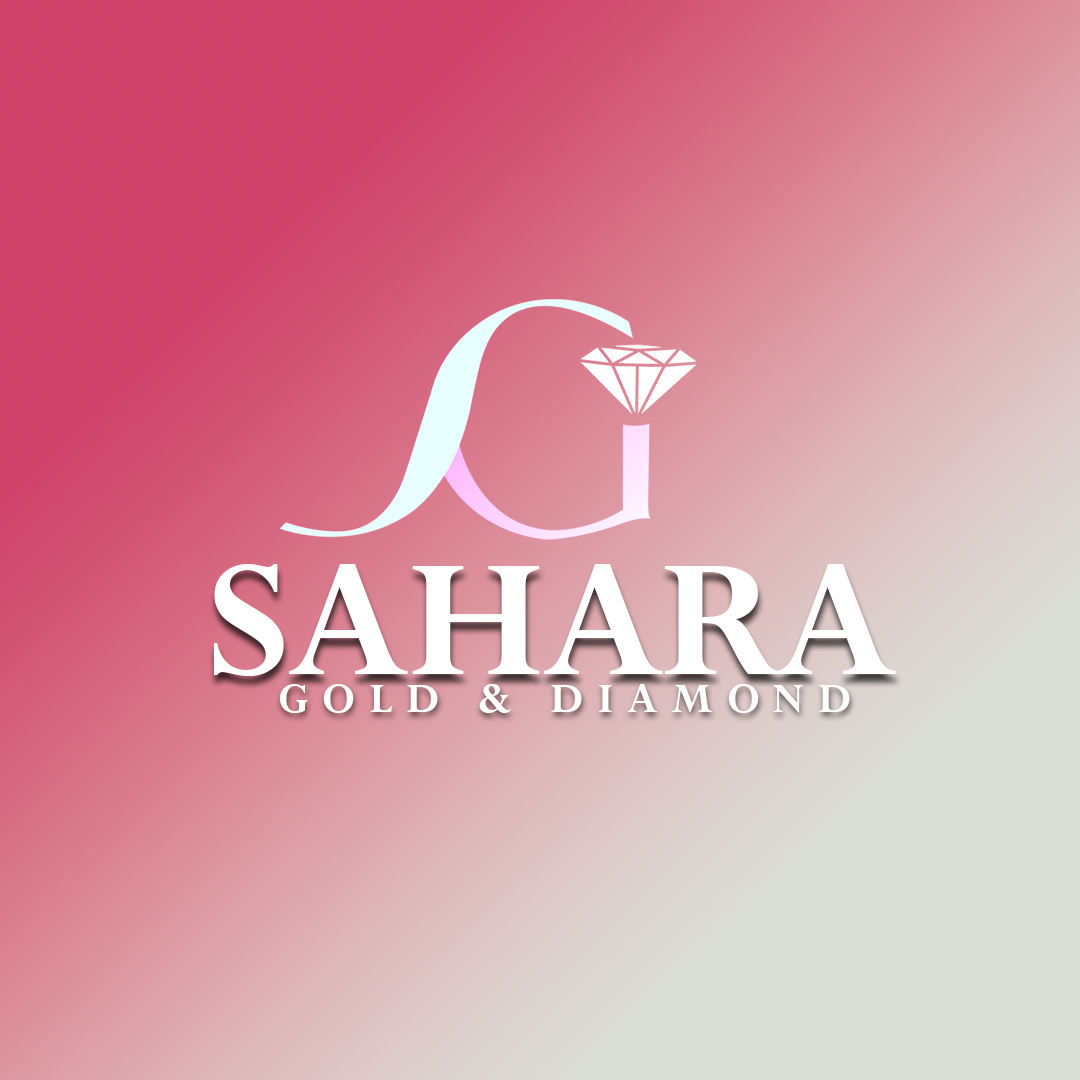
<style>
.page{position:relative;width:1080px;height:1080px}
.page>*{position:absolute;margin:0}
.t1{font:183.7px "Perpetua-Bold";letter-spacing:-0.025em;color:#ffffff;text-transform:uppercase}
.t2{font:45.8px "Perpetua-Bold";letter-spacing:0.3em;color:#ffffff;text-transform:uppercase}
</style>
<div class="page">
<p class="t1" style="left:214px;top:564px;width:682px;height:112px">SAHARA</p>
<p class="t2" style="left:279px;top:684px;width:571px;height:29px">GOLD &amp; DIAMOND</p>
</div>
